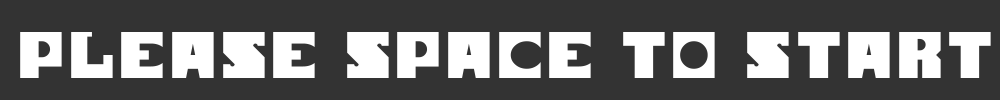
<style>
.page{position:relative;width:1000px;height:100px;background:#333333}
.page>*{position:absolute;margin:0}
.t1{font:115px "SOV_sila";color:#ffffff}
</style>
<div class="page">
<p class="t1" style="left:20px;top:32px;width:971px;height:46px">PLEASE SPACE TO START</p>
</div>
